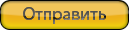
<style>
.page{position:relative;width:129px;height:30px;background:#f2c559}
.page>*{position:absolute;margin:0}
.t1{font:18px "MyriadPro-Regular";color:#575754}
</style>
<div class="page">
<p class="t1" style="left:23px;top:7px;width:83px;height:17px">Отправить</p>
</div>
